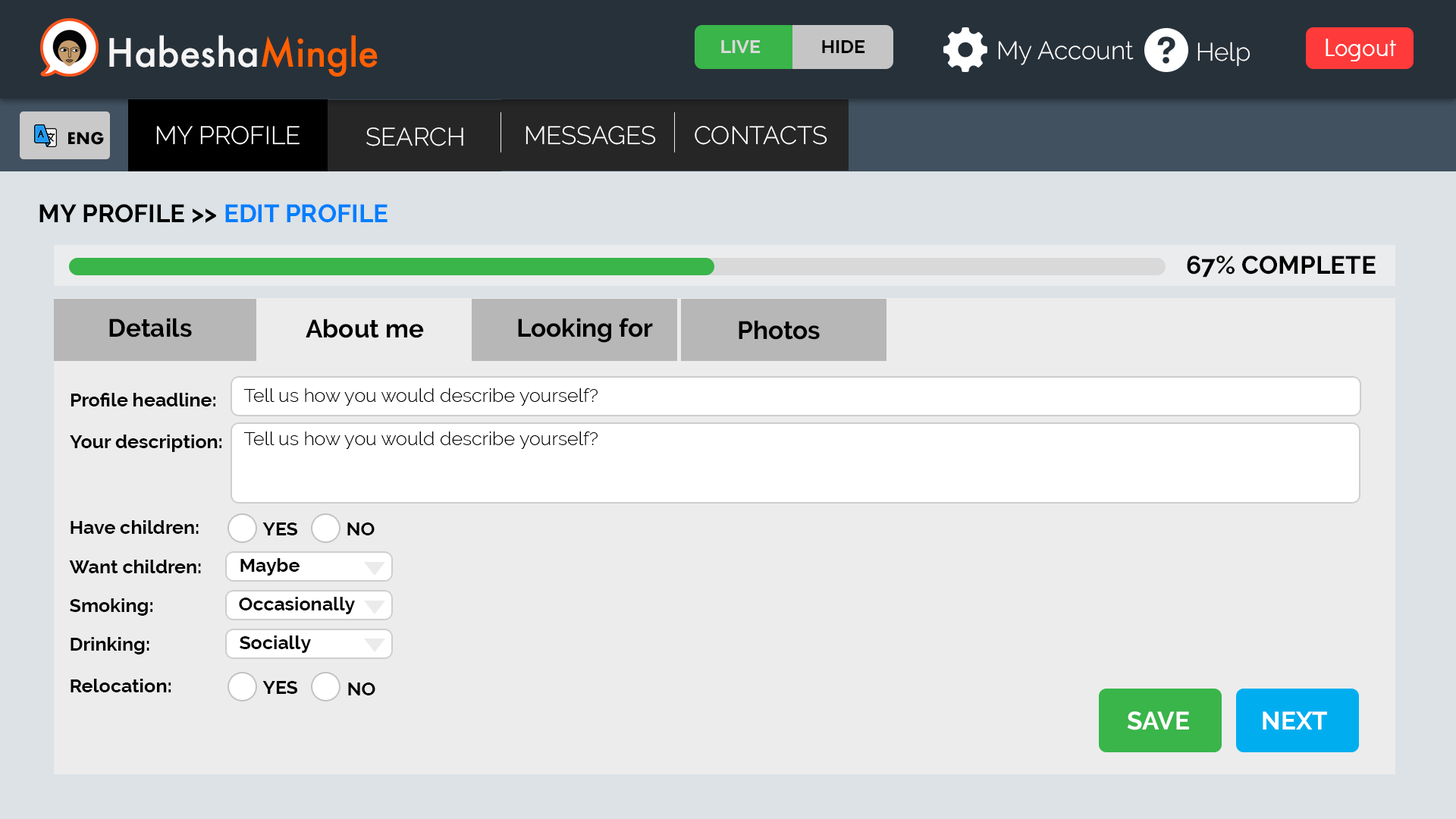
<style>
.page{position:relative;width:1456px;height:819px;background:#ececec}
.page>*{position:absolute;margin:0}
.t1{font:37.9px "Futura-Medium";color:#f5f5f5}
.t2{font:37.9px "Futura-Medium";color:#ff6000}
.t3{font:19px "Raleway-Bold";color:#d9d9d9}
.t4{font:19px "Raleway-Bold";color:#000000}
.t5{font:25.3px "Raleway-Light";color:#ffffff}
.t6{font:25.3px "DidactGothic";color:#ffffff}
.t7{font:25.3px "Raleway-Bold";color:#000000}
.t8{font:25.3px "Raleway-Bold";color:#007eff}
.t9{font:19px "Raleway-Light";color:#000000}
.t10{font:25.3px "Raleway-Bold";color:#ffffff}
</style>
<div class="page">
<p class="t1" style="left:109px;top:35px;width:269px;height:42px">Habesha<span class="t2">Mingle</span></p>
<p class="t3" style="left:721px;top:40px;width:40px;height:13px">LIVE</p>
<p class="t4" style="left:822px;top:40px;width:43px;height:13px">HIDE</p>
<p class="t5" style="left:998px;top:41px;width:136px;height:24px">My Account</p>
<p class="t5" style="left:1197px;top:42px;width:53px;height:25px">Help</p>
<p class="t6" style="left:1326px;top:39px;width:70px;height:22px">Logout</p>
<p class="t5" style="left:156px;top:126px;width:144px;height:19px">MY PROFILE</p>
<p class="t5" style="left:526px;top:126px;width:130px;height:19px">MESSAGES</p>
<p class="t5" style="left:695px;top:126px;width:132px;height:19px">CONTACTS</p>
<p class="t5" style="left:366px;top:127px;width:97px;height:19px">SEARCH</p>
<p class="t7" style="left:39px;top:204px;width:349px;height:19px">MY PROFILE &gt;&gt; <span class="t8">EDIT PROFILE</span></p>
<p class="t7" style="left:1187px;top:256px;width:189px;height:22px">67% COMPLETE</p>
<p class="t7" style="left:109px;top:318px;width:83px;height:19px">Details</p>
<p class="t7" style="left:518px;top:318px;width:135px;height:25px">Looking for</p>
<p class="t7" style="left:306px;top:318px;width:118px;height:20px">About me</p>
<p class="t7" style="left:739px;top:320px;width:81px;height:20px">Photos</p>
<p class="t9" style="left:243px;top:388px;width:355px;height:18px">Tell us how you would describe yourself?</p>
<p class="t4" style="left:71px;top:393px;width:144px;height:13px">Profile headline:</p>
<p class="t4" style="left:70px;top:435px;width:151px;height:17px">Your description:</p>
<p class="t9" style="left:243px;top:431px;width:355px;height:18px">Tell us how you would describe yourself?</p>
<p class="t4" style="left:71px;top:520px;width:128px;height:14px">Have children:</p>
<p class="t4" style="left:262px;top:522px;width:36px;height:13px">YES</p>
<p class="t4" style="left:347px;top:522px;width:28px;height:13px">NO</p>
<p class="t4" style="left:69px;top:560px;width:132px;height:13px">Want children:</p>
<p class="t4" style="left:240px;top:558px;width:60px;height:18px">Maybe</p>
<p class="t4" style="left:70px;top:598px;width:82px;height:18px">Smoking:</p>
<p class="t4" style="left:239px;top:597px;width:116px;height:17px">Occasionally</p>
<p class="t4" style="left:71px;top:637px;width:78px;height:17px">Drinking:</p>
<p class="t4" style="left:240px;top:635px;width:71px;height:18px">Socially</p>
<p class="t4" style="left:71px;top:679px;width:100px;height:13px">Relocation:</p>
<p class="t4" style="left:262px;top:681px;width:36px;height:13px">YES</p>
<p class="t4" style="left:348px;top:682px;width:27px;height:13px">NO</p>
<p class="t10" style="left:1127px;top:711px;width:62px;height:19px">SAVE</p>
<p class="t10" style="left:1263px;top:711px;width:64px;height:19px">NEXT</p>
</div>
